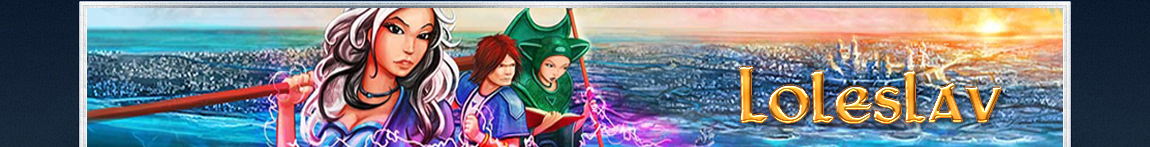
<style>
.page{position:relative;width:1150px;height:147px}
.page>*{position:absolute;margin:0}
.t1{font:72px "Martel";font-weight:bold}
</style>
<div class="page">
<p class="t1" style="left:739px;top:66px;width:263px;height:58px">Loleslav</p>
</div>
